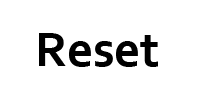
<style>
.page{position:relative;width:197px;height:100px;background:#ffffff}
.page>*{position:absolute;margin:0}
.t1{font:50.8px "Corbel-Bold";color:#000000}
</style>
<div class="page">
<p class="t1" style="left:39px;top:33px;width:119px;height:34px">Reset</p>
</div>
